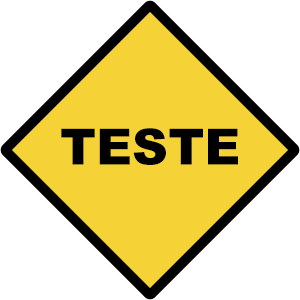
<style>
.page{position:relative;width:300px;height:300px;background:#ffffff}
.page>*{position:absolute;margin:0}
.t1{font:50px "Arial-Black";color:#000000}
</style>
<div class="page">
<p class="t1" style="left:61px;top:128px;width:177px;height:37px">TESTE</p>
</div>
